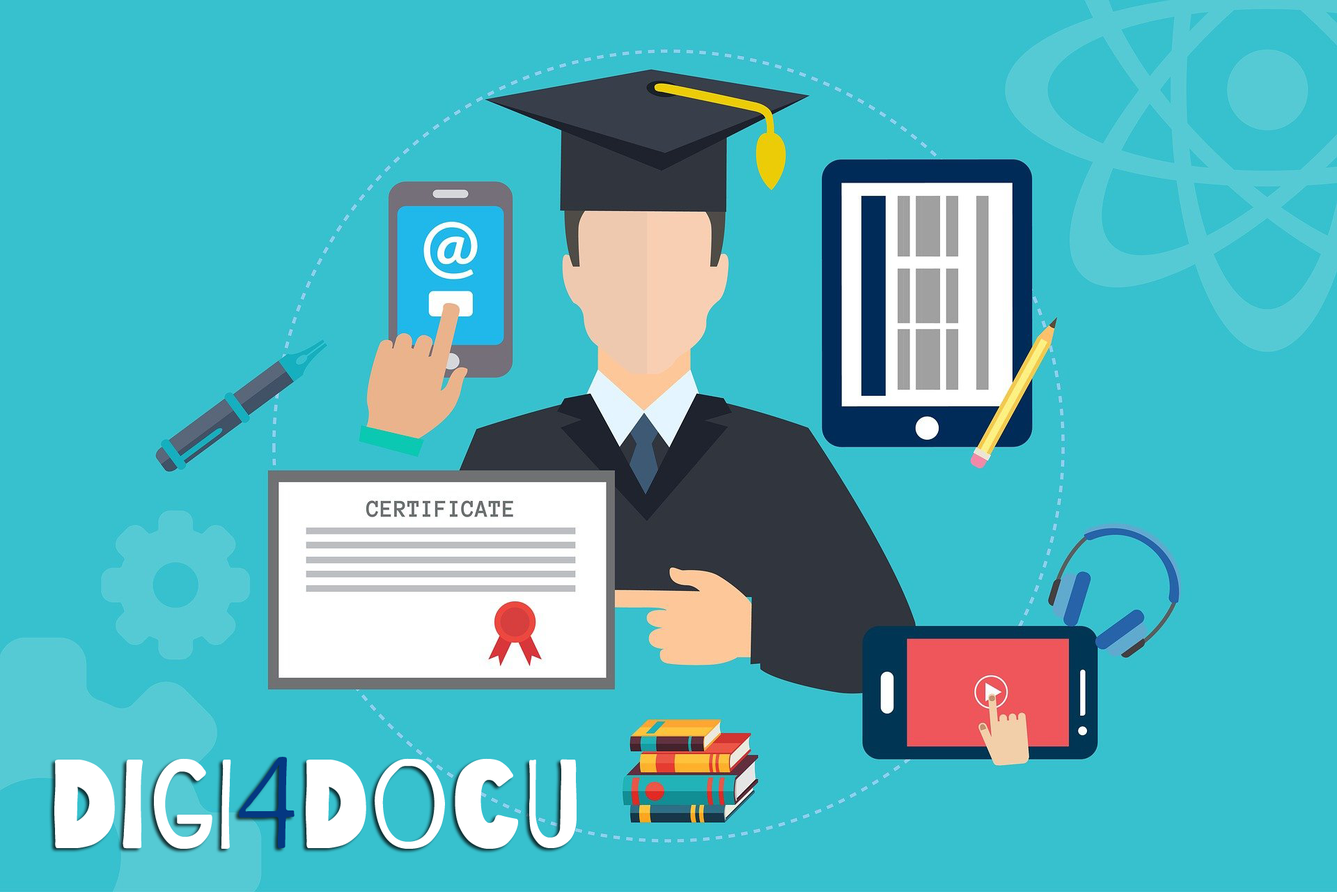
<style>
.page{position:relative;width:1337px;height:892px;background:#37c1ce}
.page>*{position:absolute;margin:0}
.t1{font:125.4px "Barrio-Regular";color:#ffffff}
.t2{font:125.4px "Barrio-Regular";color:#043882}
</style>
<div class="page">
<p class="t1" style="left:54px;top:756px;width:523px;height:92px">Digi<span class="t2">4</span>Docu</p>
</div>
